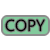
<style>
.page{position:relative;width:50px;height:50px;background:#ffffff}
.page>*{position:absolute;margin:0}
.t1{font:16px "MicrosoftPhagsPa";color:#000000}
</style>
<div class="page">
<p class="t1" style="left:5px;top:19px;width:40px;height:13px">COPY</p>
</div>
